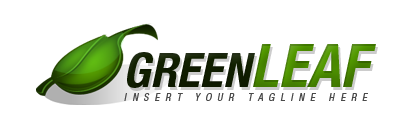
<style>
.page{position:relative;width:414px;height:133px;background:#ffffff}
.page>*{position:absolute;margin:0}
.t1{font:48px "HelveticaNeueLTStd-BdCnO";color:#112000}
.t2{font:60px "HelveticaNeueLTStd-BdCnO";color:#529900}
.t3{font:10px "HelveticaNeueLTStd-CnO";letter-spacing:0.6em;color:#4a4a4a}
</style>
<div class="page">
<p class="t1" style="left:127px;top:44px;width:249px;height:44px">GREEN<span class="t2">LEAF</span></p>
<p class="t3" style="left:124px;top:93px;width:244px;height:8px">INSERT YOUR TAGLINE HERE</p>
</div>
